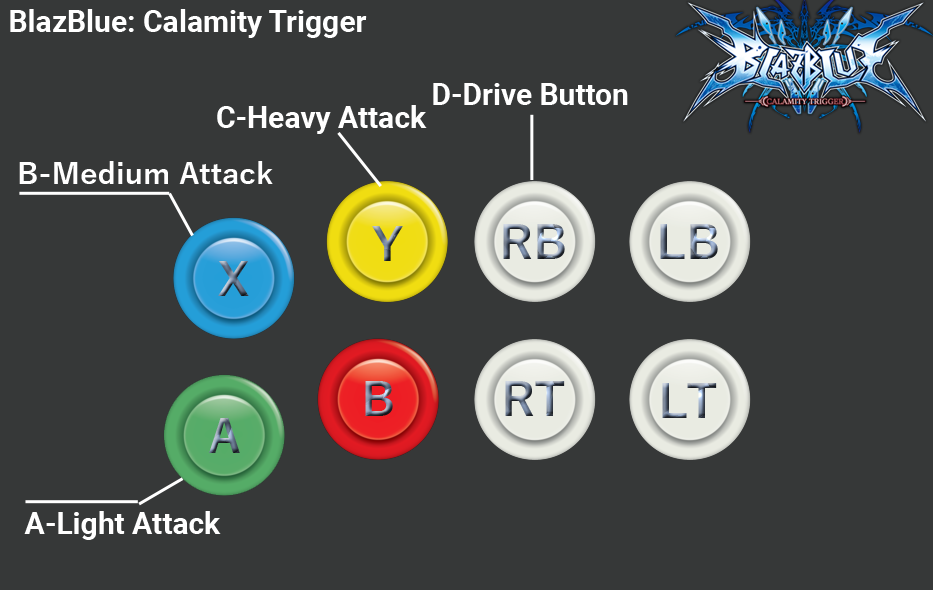
<style>
.page{position:relative;width:933px;height:590px;background:#363838}
.page>*{position:absolute;margin:0}
.t1{font:30px "Roboto-Bold";color:#ffffff}
.t2{font:30px "YuGothic-Bold";color:#ffffff}
</style>
<div class="page">
<p class="t1" style="left:10px;top:9px;width:357px;height:29px">BlazBlue: Calamity Trigger</p>
<p class="t1" style="left:433px;top:83px;width:195px;height:22px">D-Drive Button</p>
<p class="t1" style="left:217px;top:105px;width:210px;height:29px">C-Heavy Attack</p>
<p class="t2" style="left:19px;top:161px;width:254px;height:23px">B-Medium Attack</p>
<p class="t1" style="left:24px;top:511px;width:197px;height:29px">A-Light Attack</p>
</div>
